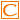
<style>
.page{position:relative;width:20px;height:20px;background:#ffffff}
.page>*{position:absolute;margin:0}
.t1{font:16px "Calligraphic421BT-RomanB";color:#f47301}
</style>
<div class="page">
<p class="t1" style="left:3px;top:4px;width:14px;height:13px">C</p>
</div>
